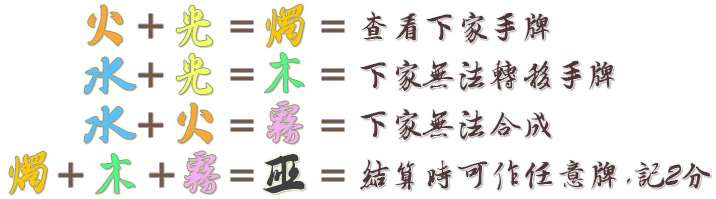
<style>
.page{position:relative;width:716px;height:199px;background:#ffffff}
.page>*{position:absolute;margin:0}
.t1{font:58.3px "SCFwxz";color:#ffa734}
.t2{font:46.1px "SCFwxz";color:#f3ff69}
.t3{font:51.2px "SCFwxz";color:#ffc704}
.t4{font:45.5px "SCFwxz";color:#715a45}
.t5{font:32.9px "SCFwxz";color:#523535}
.t6{font:37.6px "AdobeHeitiStd-Regular";color:#6f5b46}
.t7{font:46.5px "SCFwxz";color:#47ff84}
.t8{font:60.9px "SCFwxz";color:#58c2ff}
.t9{font:47.8px "SCFwxz";color:#f4aef0}
.t10{font:48.3px "SCFwxz";color:#3f3f3f}
</style>
<div class="page">
<p class="t1" style="left:88px;top:5px;width:35px;height:40px">火</p>
<p class="t2" style="left:176px;top:6px;width:36px;height:40px">光</p>
<p class="t3" style="left:266px;top:5px;width:38px;height:42px">烛</p>
<p class="t4" style="left:138px;top:14px;width:25px;height:24px">+</p>
<p class="t5" style="left:361px;top:11px;width:188px;height:33px">查看下家手牌</p>
<p class="t6" style="left:231px;top:21px;width:22px;height:11px">=</p>
<p class="t6" style="left:322px;top:21px;width:22px;height:11px">=</p>
<p class="t2" style="left:176px;top:54px;width:36px;height:40px">光</p>
<p class="t7" style="left:264px;top:53px;width:40px;height:40px">木</p>
<p class="t8" style="left:84px;top:57px;width:52px;height:37px">水</p>
<p class="t4" style="left:138px;top:63px;width:25px;height:24px">+</p>
<p class="t5" style="left:360px;top:60px;width:254px;height:32px">下家无法转移手牌</p>
<p class="t6" style="left:231px;top:69px;width:22px;height:11px">=</p>
<p class="t6" style="left:322px;top:69px;width:22px;height:11px">=</p>
<p class="t9" style="left:267px;top:101px;width:36px;height:43px">雾</p>
<p class="t8" style="left:84px;top:106px;width:52px;height:37px">水</p>
<p class="t4" style="left:138px;top:113px;width:25px;height:24px">+</p>
<p class="t1" style="left:178px;top:103px;width:35px;height:40px">火</p>
<p class="t5" style="left:360px;top:109px;width:191px;height:32px">下家无法合成</p>
<p class="t6" style="left:231px;top:120px;width:22px;height:11px">=</p>
<p class="t6" style="left:322px;top:120px;width:22px;height:11px">=</p>
<p class="t3" style="left:9px;top:152px;width:38px;height:42px">烛</p>
<p class="t7" style="left:95px;top:154px;width:40px;height:40px">木</p>
<p class="t9" style="left:184px;top:151px;width:36px;height:43px">雾</p>
<p class="t10" style="left:262px;top:154px;width:43px;height:40px">巫</p>
<p class="t5" style="left:360px;top:159px;width:351px;height:31px">结算时可作任意牌,记2分</p>
<p class="t4" style="left:58px;top:163px;width:25px;height:24px">+</p>
<p class="t4" style="left:149px;top:163px;width:25px;height:24px">+</p>
<p class="t6" style="left:231px;top:170px;width:22px;height:11px">=</p>
<p class="t6" style="left:322px;top:170px;width:22px;height:11px">=</p>
</div>
